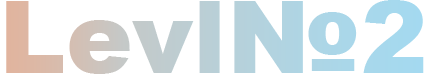
<style>
.page{position:relative;width:428px;height:74px;background:#ffffff}
.page>*{position:absolute;margin:0}
.t1{font:100px "Arial-Black";color:#b6d1db}
</style>
<div class="page">
<p class="t1" style="left:6px;top:0px;width:418px;height:74px">Levl№2</p>
</div>
